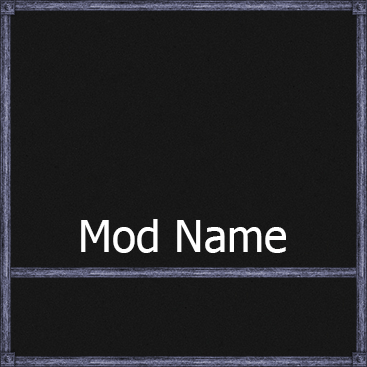
<style>
.page{position:relative;width:367px;height:367px;background:#181818}
.page>*{position:absolute;margin:0}
.t1{font:44.3px "Tahoma";color:#ffffff}
</style>
<div class="page">
<p class="t1" style="left:81px;top:219px;width:205px;height:34px">Mod Name</p>
</div>
